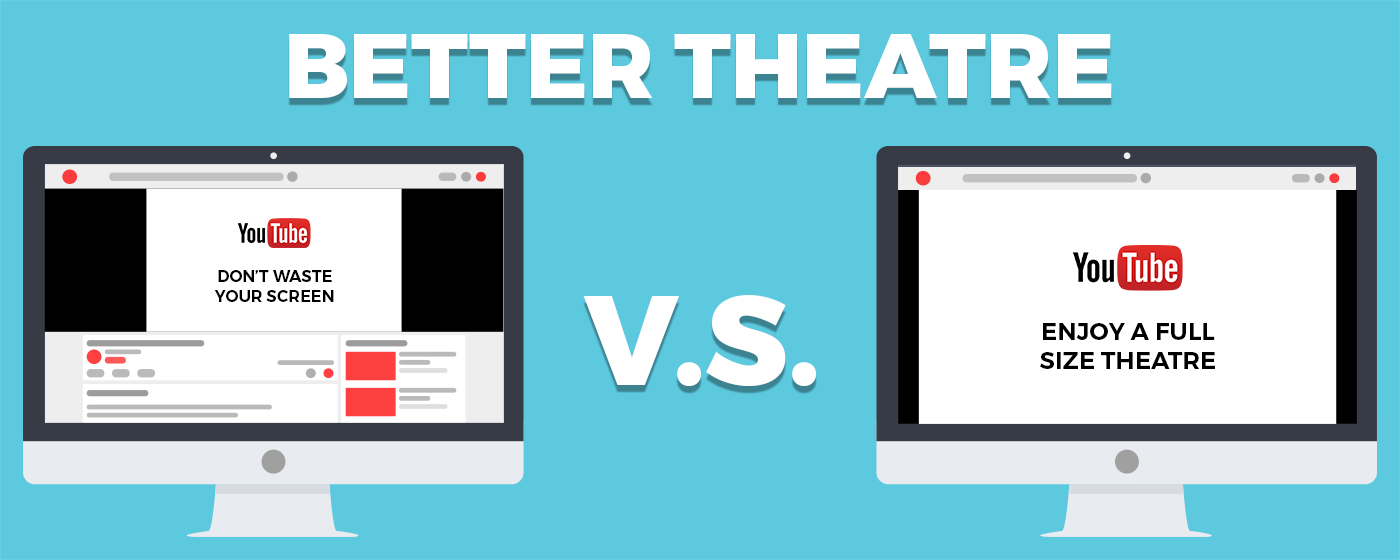
<style>
.page{position:relative;width:1400px;height:560px;background:#5cc9df}
.page>*{position:absolute;margin:0}
.t1{font:91.1px "Montserrat-ExtraBold";color:#ffffff;text-transform:uppercase}
.t2{font:16.3px "Montserrat-SemiBold";color:#000000;text-transform:uppercase}
.t3{font:126.3px "Montserrat-ExtraBold";color:#ffffff;text-transform:uppercase}
.t4{font:24.2px "Montserrat-SemiBold";color:#000000;text-transform:uppercase}
</style>
<div class="page">
<p class="t1" style="left:289px;top:34px;width:823px;height:64px">Better Theatre</p>
<p class="t2" style="left:214px;top:270px;width:120px;height:32px;text-align:center">Don’t waste<br>your screen</p>
<p class="t3" style="left:583px;top:295px;width:233px;height:91px">V.S.</p>
<p class="t4" style="left:1040px;top:323px;width:175px;height:46px;text-align:center">Enjoy a full<br>size theatre</p>
</div>
